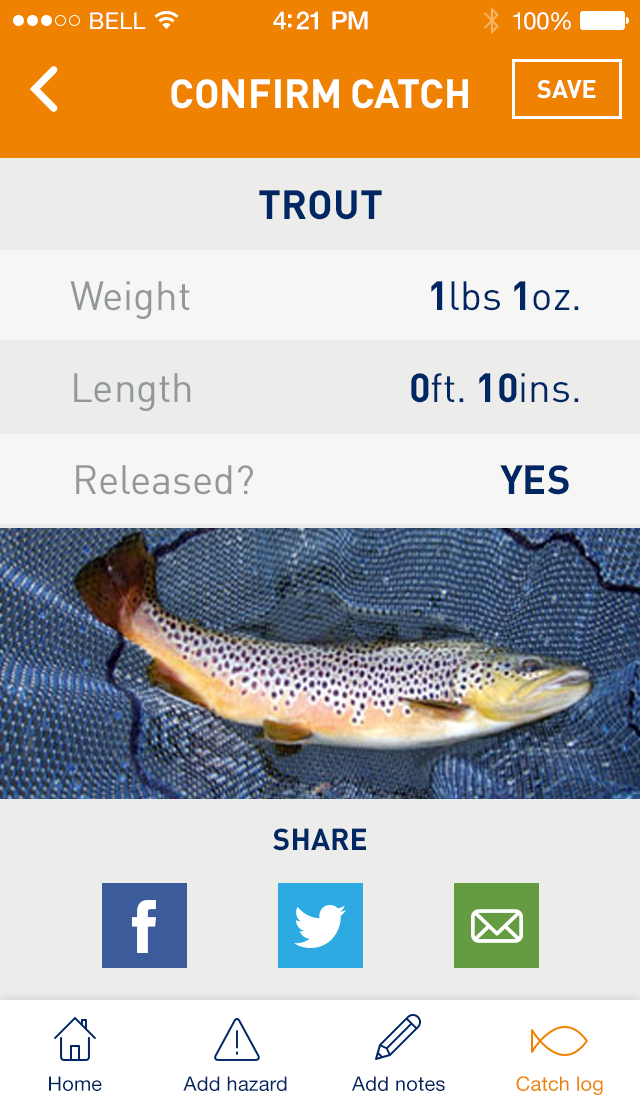
<style>
.page{position:relative;width:640px;height:1098px;background:#ecedeb}
.page>*{position:absolute;margin:0}
.t1{font:23px "HelveticaNeue";letter-spacing:0.02em;color:#ffffff}
.t2{font:25px "HelveticaNeue-Medium";letter-spacing:-0.02em;color:#ffffff}
.t3{font:24px "HelveticaNeue";letter-spacing:-0.02em;color:#ffffff}
.t4{font:40px "DIN-Bold";color:#ffffff;text-transform:uppercase}
.t5{font:25px "DIN-Bold";color:#ffffff;text-transform:uppercase}
.t6{font:40px "DIN-Bold";color:#002663;text-transform:uppercase}
.t7{font:40px "DIN-Regular";color:#91979a}
.t8{font:40px "DIN-Regular";color:#002663}
.t9{font:40px "DIN-Bold";color:#002663}
.t10{font:30px "DIN-Bold";color:#002663;text-transform:uppercase}
.t11{font:20px "HelveticaNeue";letter-spacing:0.01em;color:#002663}
.t12{font:20px "HelveticaNeue";letter-spacing:0.01em;color:#ef8200}
</style>
<div class="page">
<p class="t1" style="left:90px;top:12px;width:56px;height:17px">BELL</p>
<p class="t2" style="left:273px;top:11px;width:95px;height:19px">4:21 PM</p>
<p class="t3" style="left:513px;top:12px;width:58px;height:18px">100%</p>
<p class="t4" style="left:171px;top:79px;width:297px;height:30px">confirm catch</p>
<p class="t5" style="left:537px;top:80px;width:59px;height:19px">save</p>
<p class="t6" style="left:259px;top:190px;width:123px;height:30px">Trout</p>
<p class="t7" style="left:70px;top:281px;width:120px;height:38px">Weight</p>
<p class="t8" style="left:431px;top:281px;width:148px;height:30px"><span class="t9">1</span>lbs <span class="t9">1</span>oz.</p>
<p class="t7" style="left:74px;top:373px;width:117px;height:38px">Length</p>
<p class="t8" style="left:411px;top:373px;width:168px;height:30px"><span class="t9">0</span>ft. <span class="t9">10</span>ins.</p>
<p class="t7" style="left:76px;top:465px;width:177px;height:30px">Released?</p>
<p class="t9" style="left:500px;top:465px;width:69px;height:30px">YES</p>
<p class="t10" style="left:273px;top:828px;width:93px;height:23px">share</p>
<p class="t11" style="left:49px;top:1076px;width:53px;height:15px">Home</p>
<p class="t11" style="left:183px;top:1076px;width:104px;height:15px">Add hazard</p>
<p class="t11" style="left:352px;top:1076px;width:93px;height:15px">Add notes</p>
<p class="t12" style="left:516px;top:1076px;width:87px;height:19px">Catch log</p>
</div>
